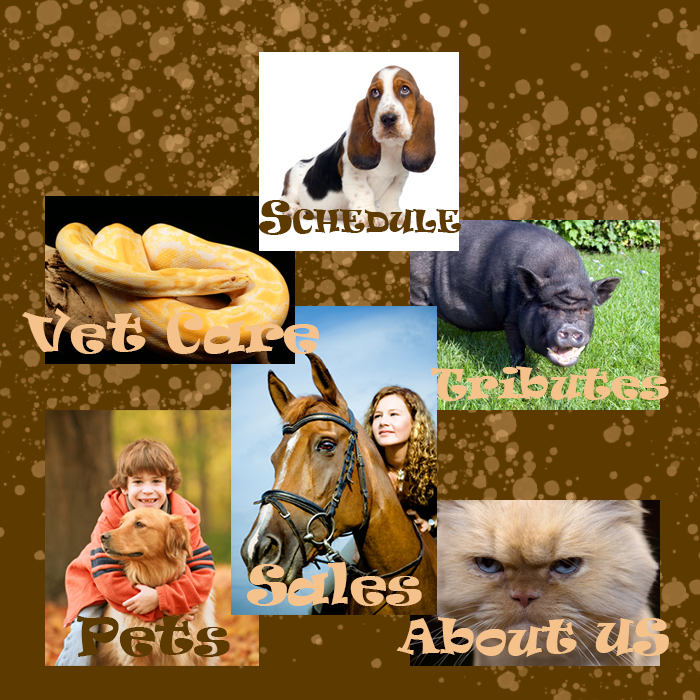
<style>
.page{position:relative;width:700px;height:700px;background:#5d3a00}
.page>*{position:absolute;margin:0}
.t1{font:41.2px "Ravie";color:#5d3a00;font-variant:small-caps}
.t2{font:50px "Ravie";color:#f6c28b}
.t3{font:39.6px "Ravie";color:#f6c28b}
.t4{font:50px "Ravie";color:#5d3a00}
.t5{font:44.8px "Ravie";color:#f6c28b}
</style>
<div class="page">
<p class="t1" style="left:259px;top:200px;width:202px;height:35px">Schedule</p>
<p class="t2" style="left:22px;top:308px;width:297px;height:46px">Vet Care</p>
<p class="t3" style="left:430px;top:366px;width:239px;height:35px">Tributes</p>
<p class="t2" style="left:246px;top:562px;width:176px;height:44px">Sales</p>
<p class="t4" style="left:77px;top:615px;width:153px;height:42px">Pets</p>
<p class="t5" style="left:396px;top:617px;width:273px;height:40px">About US</p>
</div>
